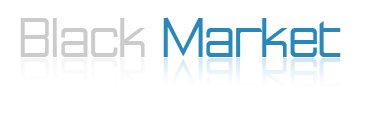
<style>
.page{position:relative;width:370px;height:118px;background:#ffffff}
.page>*{position:absolute;margin:0}
.t1{font:60px "RationalInteger"}
.t2{font:60px "RationalInteger";color:#f9fafb}
</style>
<div class="page">
<p class="t1" style="left:20px;top:17px;width:321px;height:40px">Black Market</p>
<p class="t2" style="left:20px;top:58px;width:321px;height:40px">Black Market</p>
</div>
